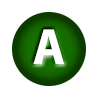
<style>
.page{position:relative;width:96px;height:96px;background:#ffffff}
.page>*{position:absolute;margin:0}
.t1{font:51.1px "MyriadPro-Bold";color:#ffffff;scale:0.97 1}
</style>
<div class="page">
<p class="t1" style="left:33px;top:29px;width:31px;height:35px">A</p>
</div>
